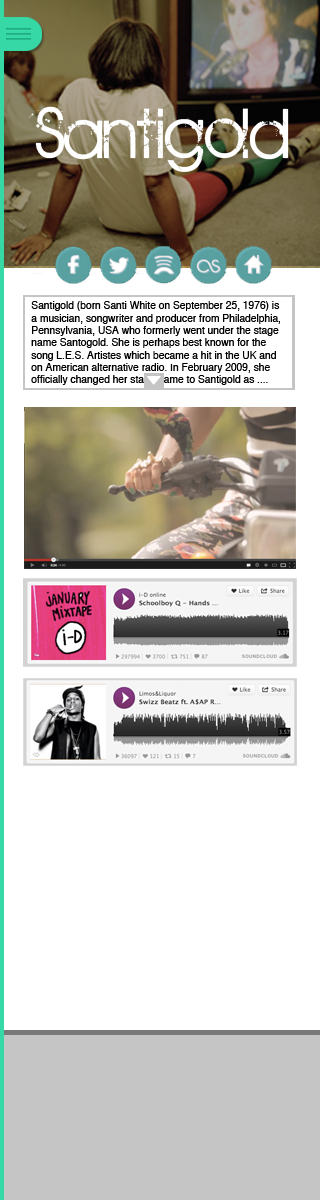
<style>
.page{position:relative;width:320px;height:1200px;background:#ffffff}
.page>*{position:absolute;margin:0}
.t1{font:77px "BIRTHOFAHERO";color:#ffffff}
.t2{font:10.2px "Helvetica";color:#000000}
</style>
<div class="page">
<p class="t1" style="left:28px;top:106px;width:261px;height:66px">Santigold</p>
<p class="t2" style="left:31px;top:301px;width:249px;height:84px">Santigold (born Santi White on September 25, 1976) is <br>a musician, songwriter and producer from Philadelphia, <br>Pennsylvania, USA who formerly went under the stage <br>name Santogold. She is perhaps best known for the <br>song L.E.S. Artistes which became a hit in the UK and <br>on American alternative radio. In February 2009, she <br>officially changed her stage name to Santigold as ....</p>
</div>
